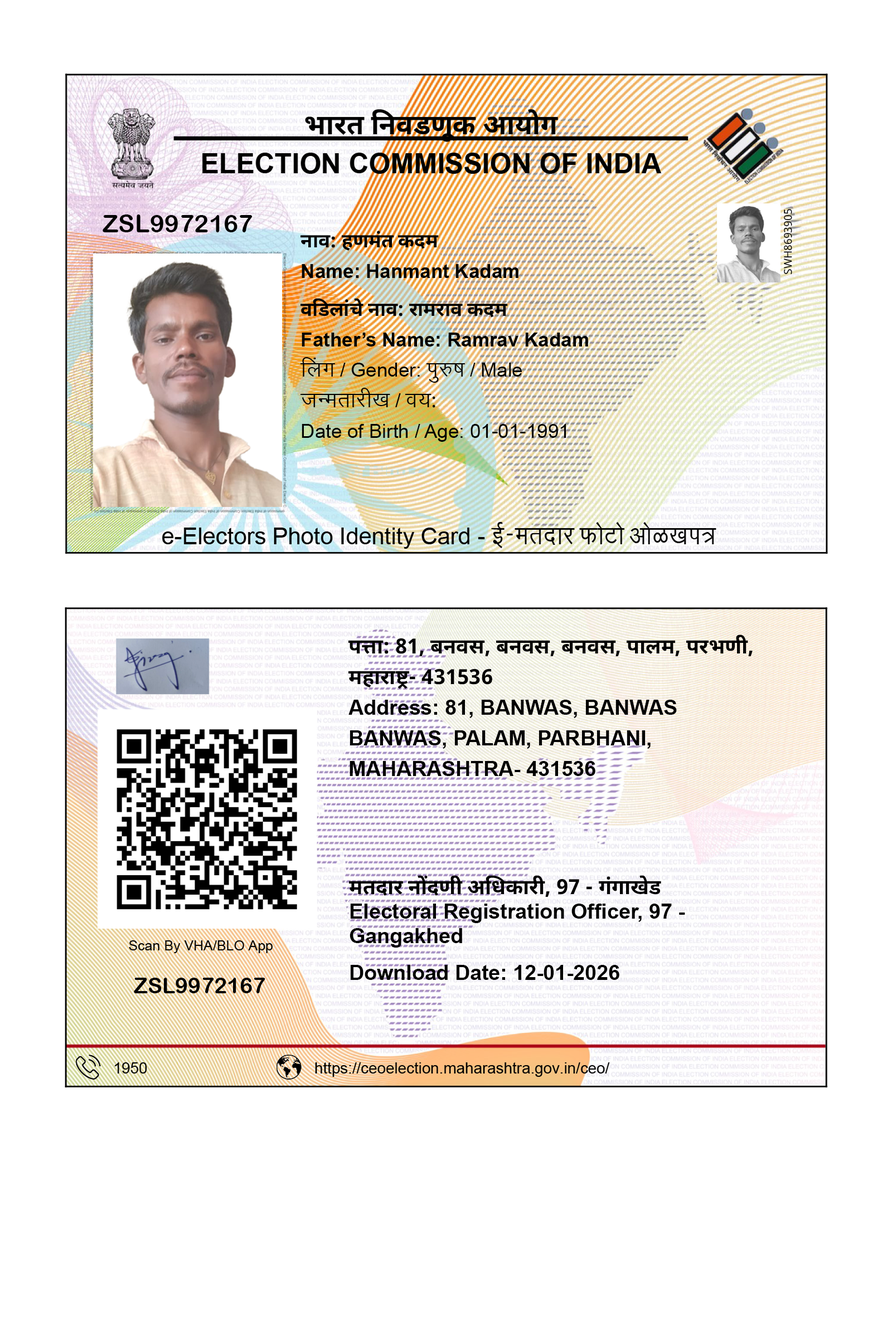
<style>
.page{position:relative;width:892px;height:1337px;background:#ffffff}
.page>*{position:absolute;margin:0}
.t1{font:10.8px "NotoSansDevanagari-Regular";color:#000000}
.t2{font:24.8px "ArialRoundedMTBold";color:#000000}
.t3{font:19.5px/49px "ArialMT";color:#000000}
.t4{font:19.5px/49px "NotoSansDevanagari-Bold";color:#000000}
.t5{font:19.5px "NotoSansDevanagari-Bold";color:#000000}
.t6{font:19.5px "Arial-BoldMT";color:#000000}
.t7{font:19.5px/49px "Arial-BoldMT";color:#000000}
.t8{font:19.5px/49px "DVOTYogeshNormal";color:#000000}
.t9{font:19.5px/49px "NotoSansDevanagari-Regular";color:#000000}
.t10{font:20.9px/52.4px "Arial-BoldMT";color:#000000}
.t11{font:20.9px/52.4px "NotoSansDevanagari-Bold";color:#000000}
.t12{font:21.7px "ArialRoundedMTBold";color:#000000}
</style>
<div class="page">
<p class="t1" style="left:783px;top:209px;width:9px;height:66px;rotate:-90deg">SWH8693905</p>
<p class="t2" style="left:103px;top:215px;width:149px;height:17px">ZSL9972167</p>
<p class="t3" style="left:300px;top:231px;width:288px;height:211px"><span class="t4">ना</span><span class="t5">व: हणमंत कदम<br></span><span class="t6">Nam</span><span class="t7">e: Hanmant Kadam<br></span><span class="t4">वडिलांचे नाव: रामराव कदम<br></span><span class="t7">Father’s Name: Ramrav Kadam<br></span><span class="t8">लिंग </span>/ Gender: <span class="t8">पुरुष </span>/ Male<br><span class="t8">जन्मतारीख </span>/<span class="t8"> वय</span><span class="t9">:<br></span>Date of Birth / Age: 01-01-1991</p>
<p class="t10" style="left:348px;top:635px;width:404px;height:141px"><span class="t11">पत्ता: 81, बनवस, बनवस, बनवस, पालम, परभणी,<br>महाराष्ट्र- 431536<br></span>Address: 81, BANWAS, BANWAS<br>BANWAS, PALAM, PARBHANI,<br>MAHARASHTRA- 431536</p>
<p class="t10" style="left:349px;top:875px;width:336px;height:105px"><span class="t11">मतदार नोंदणी अधिकारी, 97 - गंगाखेड<br></span>Electoral Registration Officer, 97 -<br>Gangakhed<br>Download Date: 12-01-2026</p>
<p class="t12" style="left:134px;top:978px;width:131px;height:16px">ZSL9972167</p>
</div>
